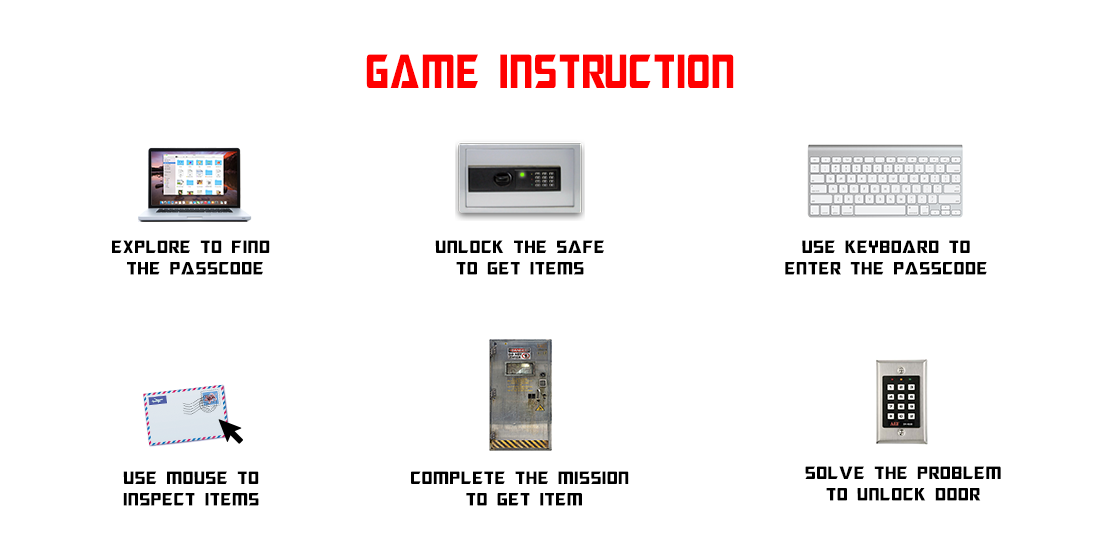
<style>
.page{position:relative;width:1100px;height:550px;background:#ffffff}
.page>*{position:absolute;margin:0}
.t1{font:48px "MegatronCondensed";color:#ff0000}
.t2{font:18px "Megatron";color:#000000}
</style>
<div class="page">
<p class="t1" style="left:366px;top:54px;width:368px;height:34px">game instruction</p>
<p class="t2" style="left:112px;top:240px;width:158px;height:35px;text-align:center">explore to find <br>the passcode</p>
<p class="t2" style="left:435px;top:240px;width:169px;height:35px;text-align:center">unlock the safe<br>to get items</p>
<p class="t2" style="left:785px;top:240px;width:202px;height:35px;text-align:center">uSE keyboard to<br>enter the passcode</p>
<p class="t2" style="left:123px;top:471px;width:136px;height:35px;text-align:center">uSE mouse to<br>inspect items</p>
<p class="t2" style="left:411px;top:471px;width:218px;height:35px;text-align:center">complete the mission <br>to get item</p>
<p class="t2" style="left:805px;top:466px;width:196px;height:35px;text-align:center">solve the problem<br>to unlock door</p>
</div>
